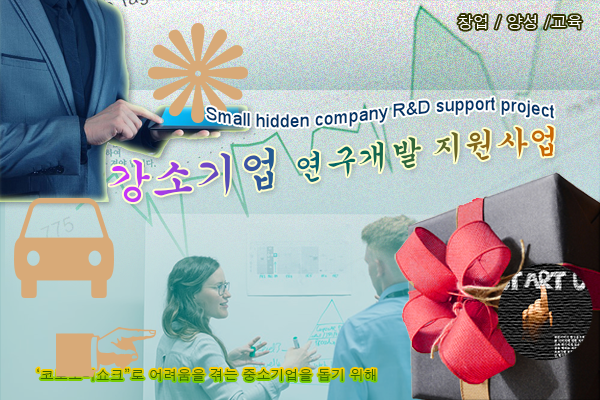
<style>
.page{position:relative;width:600px;height:400px}
.page>*{position:absolute;margin:0}
.t1{font:16px "Dotum";color:#ffffff}
.t2{font:18px/28px "ArialMT";color:#003366}
.t3{font:44px/28px "Gungsuh"}
.t4{font:32px/28px "Gungsuh"}
.t5{font:14px "Dotum";color:#336600}
</style>
<div class="page">
<p class="t1" style="left:458px;top:15px;width:124px;height:15px">창업 / 양성 /교육</p>
<p class="t2" style="left:206px;top:97px;width:348px;height:31px">Small hidden company R&amp;D support project</p>
<p class="t3" style="left:109px;top:125px;width:445px;height:78px">강소기업 <span class="t4">연구개발 </span><span class="t4">지원사업</span></p>
<p class="t5" style="left:37px;top:368px;width:339px;height:14px">‘코로노미쇼크”로 어려움을 겪는 중소기업을 돕기 위해</p>
</div>
